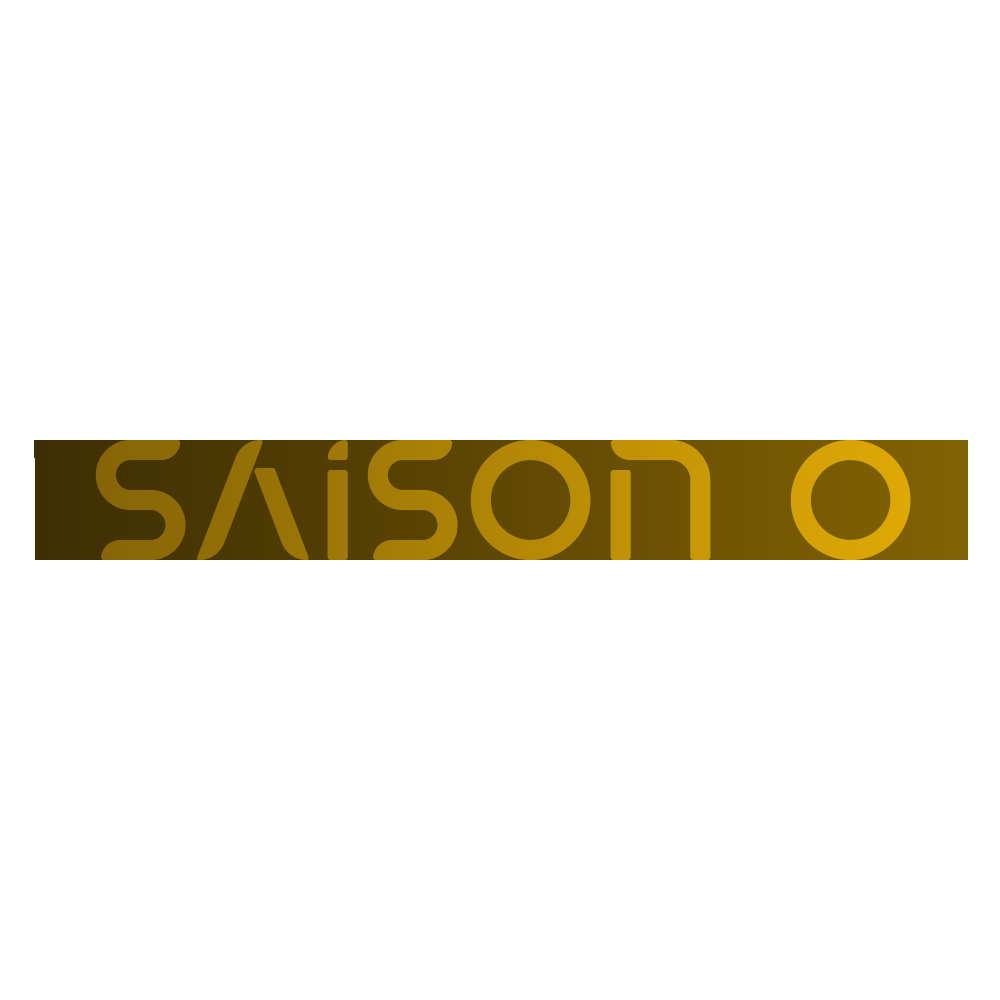
<style>
.page{position:relative;width:1000px;height:1000px;background:#ffffff}
.page>*{position:absolute;margin:0}
.t1{font:170.8px "Elounda-Regular"}
</style>
<div class="page">
<p class="t1" style="left:95px;top:440px;width:816px;height:120px">Saison 0</p>
</div>
